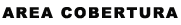
<style>
.page{position:relative;width:181px;height:25px;background:#ffffff}
.page>*{position:absolute;margin:0}
.t1{font:15px "Arial-Black";letter-spacing:0.1em;color:#080807}
</style>
<div class="page">
<p class="t1" style="left:2px;top:7px;width:176px;height:12px">AREA COBERTURA</p>
</div>
